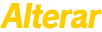
<style>
.page{position:relative;width:102px;height:32px;background:#ffffff}
.page>*{position:absolute;margin:0}
.t1{font:32px "RodinPro-EB";letter-spacing:-0.044em;color:#fecd00;font-style:italic;scale:0.93 1}
</style>
<div class="page">
<p class="t1" style="left:0px;top:3px;width:102px;height:26px">Alterar</p>
</div>
